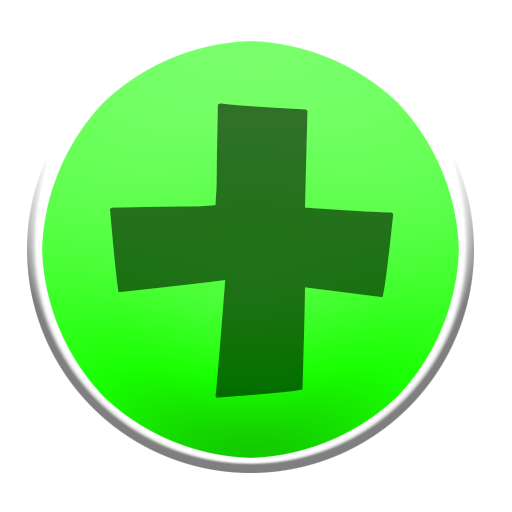
<style>
.page{position:relative;width:512px;height:512px;background:#ffffff}
.page>*{position:absolute;margin:0}
.t1{font:628px "CordelGroteska-Bold";color:#217118}
</style>
<div class="page">
<p class="t1" style="left:109px;top:103px;width:285px;height:295px">+</p>
</div>
